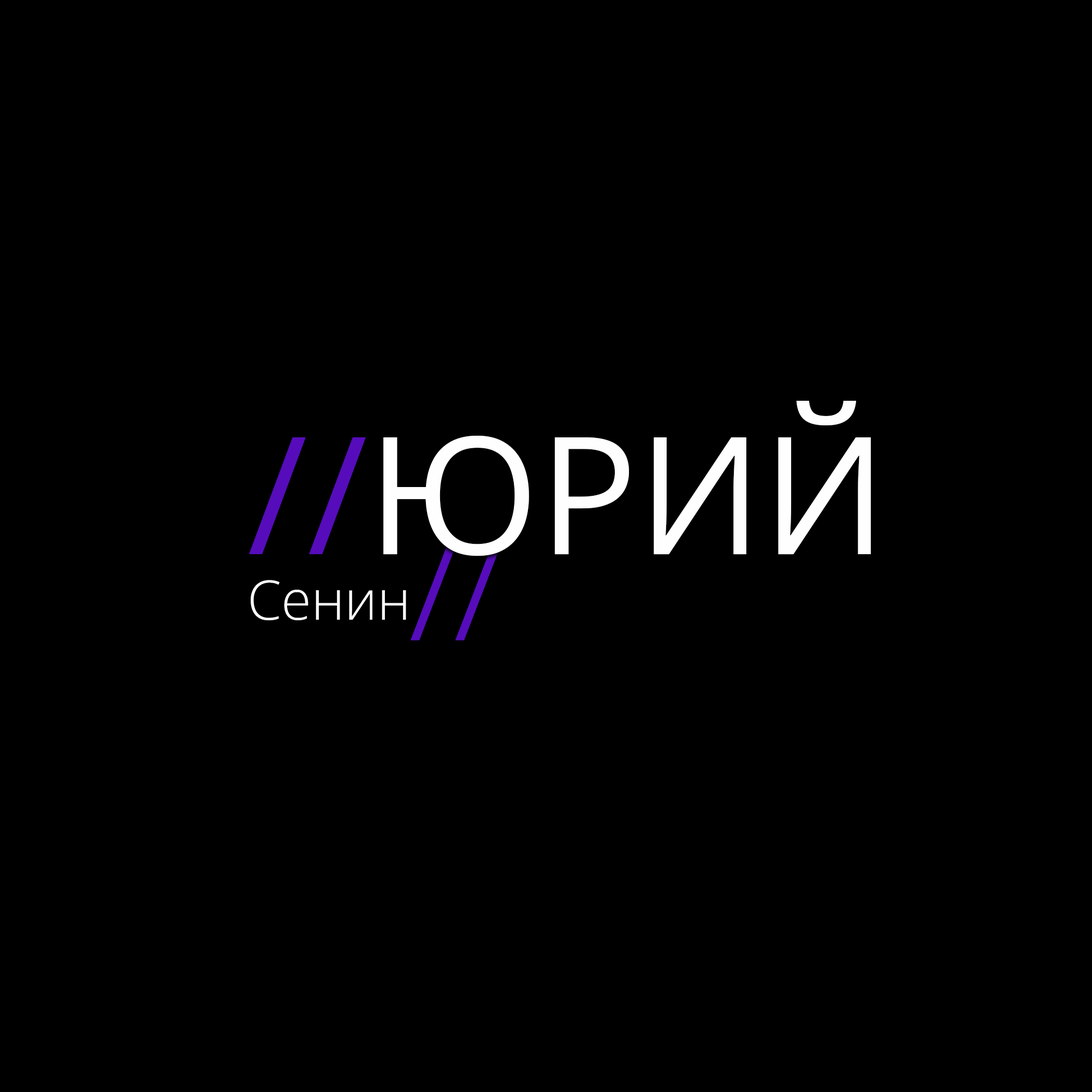
<style>
.page{position:relative;width:1092px;height:1092px;background:#000000}
.page>*{position:absolute;margin:0}
.t1{font:54.6px "OpenSansRoman-Light";color:#ffffff}
.t2{font:163.8px "OpenSans-Regular";color:#560cbb}
.t3{font:163.8px "OpenSans-Regular";color:#fefefe}
.t4{font:129.9px "MyriadPro-Regular";color:#560cbb}
</style>
<div class="page">
<p class="t1" style="left:249px;top:401px;width:622px;height:219px"><span class="t2">//</span><span class="t3">ЮРИЙ<br></span>Сенин</p>
<p class="t4" style="left:411px;top:546px;width:90px;height:94px">//</p>
</div>
